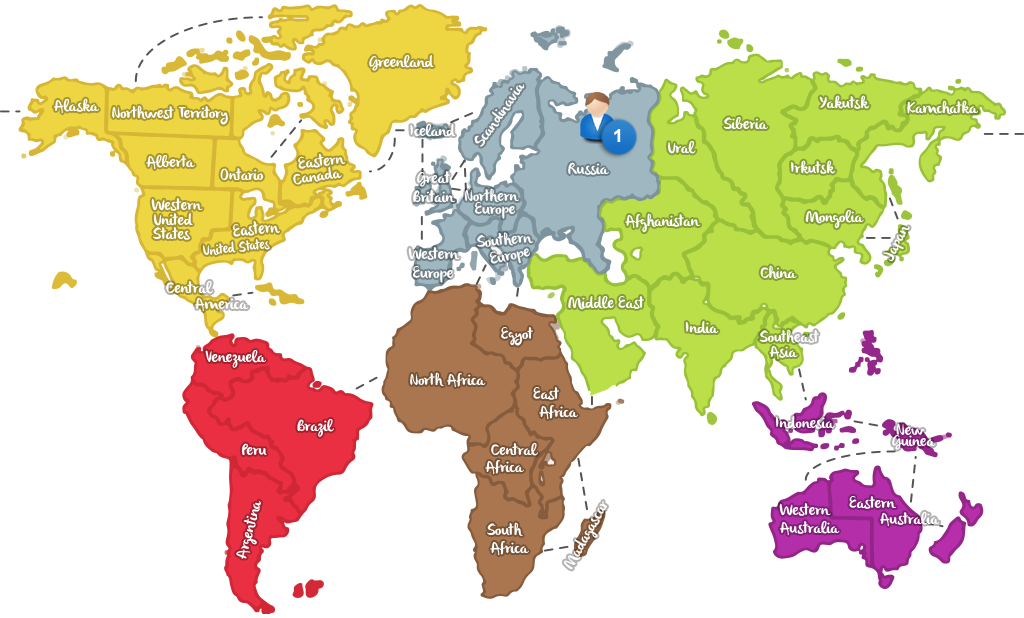
<style>
.page{position:relative;width:1024px;height:618px;background:#ffffff}
.page>*{position:absolute;margin:0}
.t1{font:16px "olivier";color:#ffffff}
.t2{font:18px "Arial-BoldMT";color:#ffffff}
.t3{font:15.9px "olivier";color:#ffffff}
.t4{font:17px "olivier";color:#ffffff;scale:0.94 1}
.t5{font:14.4px "olivier";color:#ffffff;scale:0.93 1}
</style>
<div class="page">
<p class="t1" style="left:369px;top:54px;width:65px;height:17px">Greenland</p>
<p class="t1" style="left:474px;top:84px;width:51px;height:63px;rotate:-55deg">Scandinavia</p>
<p class="t1" style="left:53px;top:98px;width:46px;height:16px">Alaska</p>
<p class="t1" style="left:819px;top:95px;width:51px;height:14px">Yakutsk</p>
<p class="t1" style="left:907px;top:100px;width:71px;height:15px">Kamchatka</p>
<p class="t1" style="left:112px;top:105px;width:116px;height:20px">Northwest Territory</p>
<p class="t1" style="left:410px;top:123px;width:45px;height:14px">Iceland</p>
<p class="t1" style="left:723px;top:117px;width:45px;height:13px">Siberia</p>
<p class="t2" style="left:614px;top:129px;width:7px;height:13px">1</p>
<p class="t1" style="left:667px;top:140px;width:29px;height:14px">Ural</p>
<p class="t1" style="left:146px;top:154px;width:49px;height:16px">Alberta</p>
<p class="t1" style="left:298px;top:153px;width:48px;height:16px;rotate:-6deg">Eastern</p>
<p class="t1" style="left:791px;top:160px;width:45px;height:14px">Irkutsk</p>
<p class="t1" style="left:220px;top:168px;width:44px;height:13px">Ontario</p>
<p class="t1" style="left:293px;top:166px;width:49px;height:19px;rotate:-9deg">Canada</p>
<p class="t3" style="left:413px;top:171px;width:42px;height:32px;text-align:center">Great<br>Britain</p>
<p class="t1" style="left:568px;top:162px;width:41px;height:13px">Russia</p>
<p class="t1" style="left:151px;top:198px;width:52px;height:13px">Western</p>
<p class="t1" style="left:464px;top:188px;width:55px;height:15px">Northern</p>
<p class="t1" style="left:474px;top:202px;width:41px;height:17px">Europe</p>
<p class="t1" style="left:805px;top:209px;width:59px;height:20px">Mongolia</p>
<p class="t1" style="left:153px;top:213px;width:40px;height:13px">United</p>
<p class="t4" style="left:232px;top:221px;width:48px;height:16px;rotate:-6deg">Eastern</p>
<p class="t1" style="left:625px;top:213px;width:76px;height:20px">Afghanistan</p>
<p class="t1" style="left:153px;top:227px;width:37px;height:13px">States</p>
<p class="t1" style="left:477px;top:232px;width:57px;height:15px;rotate:-6deg">Southern</p>
<p class="t5" style="left:202px;top:239px;width:68px;height:16px;rotate:-6deg">United States</p>
<p class="t1" style="left:408px;top:247px;width:52px;height:36px;text-align:center">Western<br>Europe</p>
<p class="t1" style="left:489px;top:248px;width:41px;height:16px;rotate:-12deg">Europe</p>
<p class="t1" style="left:760px;top:265px;width:37px;height:15px">China</p>
<p class="t1" style="left:166px;top:280px;width:47px;height:14px">Central</p>
<p class="t1" style="left:194px;top:297px;width:55px;height:15px">America</p>
<p class="t1" style="left:568px;top:295px;width:76px;height:15px">Middle East</p>
<p class="t1" style="left:501px;top:327px;width:32px;height:19px">Egyot</p>
<p class="t1" style="left:685px;top:321px;width:34px;height:13px">India</p>
<p class="t1" style="left:759px;top:329px;width:60px;height:15px">Southeast</p>
<p class="t1" style="left:205px;top:349px;width:61px;height:19px">Venezuela</p>
<p class="t1" style="left:769px;top:345px;width:29px;height:15px">Asia</p>
<p class="t1" style="left:410px;top:372px;width:76px;height:16px">North Africa</p>
<p class="t1" style="left:533px;top:387px;width:26px;height:13px">East</p>
<p class="t1" style="left:539px;top:405px;width:39px;height:15px">Africa</p>
<p class="t1" style="left:297px;top:418px;width:37px;height:19px">Brazil</p>
<p class="t1" style="left:775px;top:416px;width:60px;height:13px">Indonesia</p>
<p class="t1" style="left:896px;top:423px;width:29px;height:12px">New</p>
<p class="t3" style="left:892px;top:434px;width:44px;height:16px">Guinea</p>
<p class="t1" style="left:241px;top:443px;width:26px;height:13px">Peru</p>
<p class="t1" style="left:491px;top:442px;width:47px;height:14px">Central</p>
<p class="t1" style="left:485px;top:460px;width:39px;height:15px">Africa</p>
<p class="t1" style="left:849px;top:496px;width:48px;height:13px">Eastern</p>
<p class="t1" style="left:236px;top:500px;width:25px;height:59px;rotate:-75deg">Argentina</p>
<p class="t1" style="left:779px;top:503px;width:52px;height:13px">Western</p>
<p class="t1" style="left:779px;top:520px;width:61px;height:16px">Australia</p>
<p class="t1" style="left:879px;top:511px;width:61px;height:16px">Australia</p>
<p class="t1" style="left:487px;top:522px;width:36px;height:15px">South</p>
<p class="t1" style="left:490px;top:541px;width:39px;height:15px">Africa</p>
</div>
